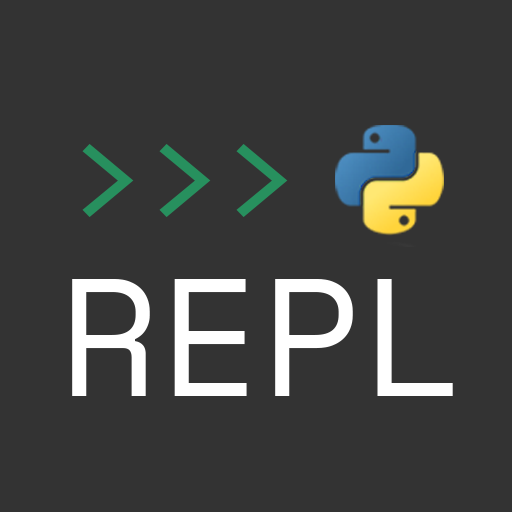
<style>
.page{position:relative;width:512px;height:512px;background:#333333}
.page>*{position:absolute;margin:0}
.t1{font:133.3px "Consolas";letter-spacing:0.025em;color:#27905e}
.t2{font:166.7px "SpaceMono-Regular";color:#ffffff}
</style>
<div class="page">
<p class="t1" style="left:82px;top:144px;width:206px;height:73px">&gt;&gt;&gt;</p>
<p class="t2" style="left:72px;top:279px;width:381px;height:117px">REPL</p>
</div>
